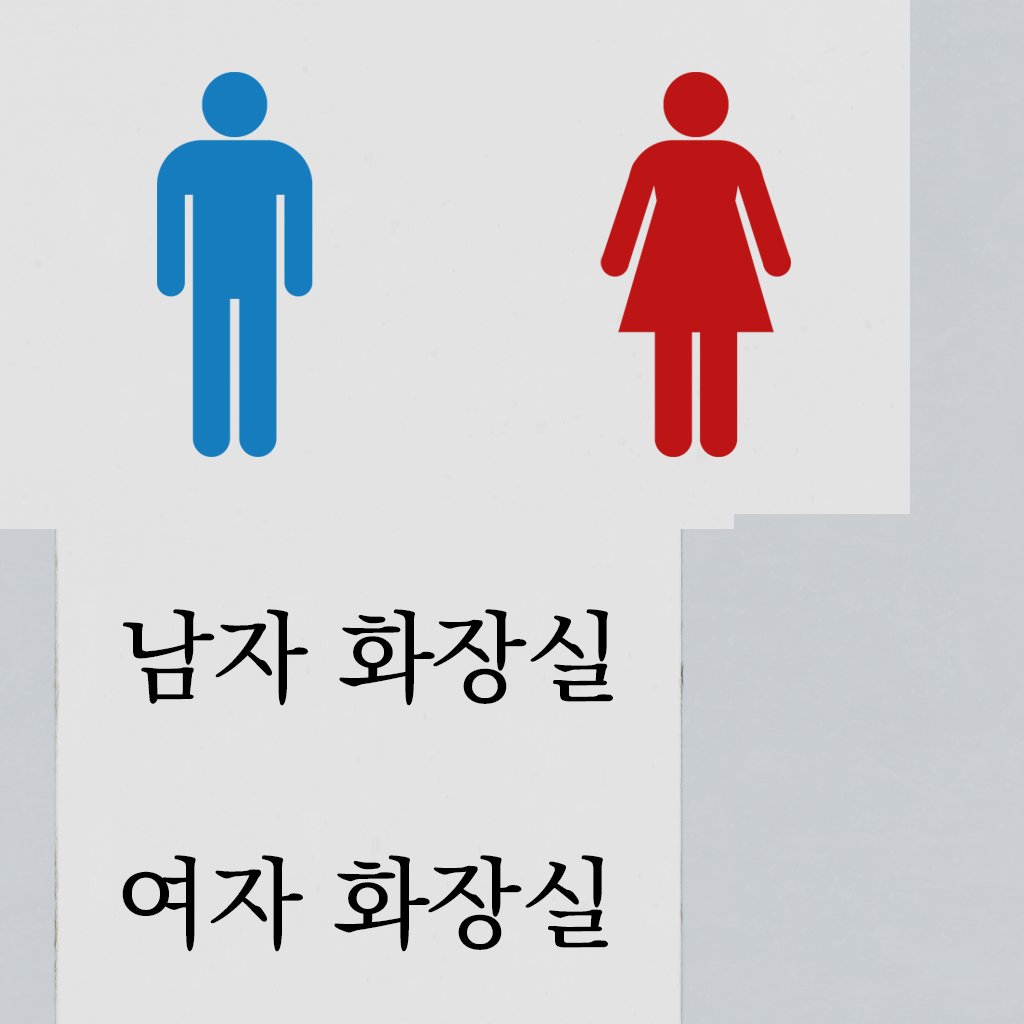
<style>
.page{position:relative;width:1024px;height:1024px;background:#e3e3e3}
.page>*{position:absolute;margin:0}
.t1{font:100px "KoPubBatangMedium";color:#000000}
</style>
<div class="page">
<p class="t1" style="left:123px;top:609px;width:490px;height:97px">남자 화장실</p>
<p class="t1" style="left:122px;top:855px;width:486px;height:97px">여자 화장실</p>
</div>
